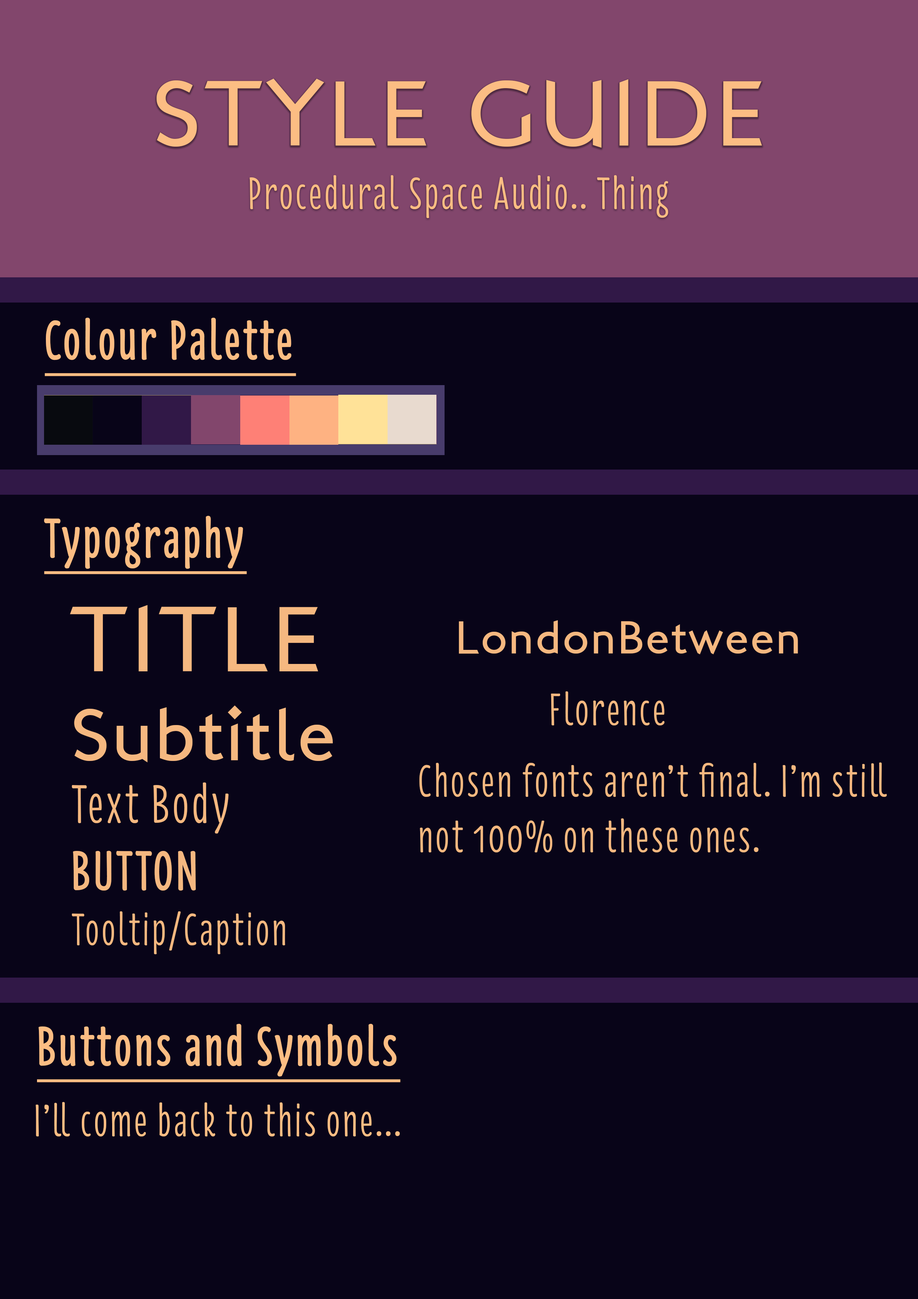
<style>
.page{position:relative;width:918px;height:1299px;background:#080418}
.page>*{position:absolute;margin:0}
.t1{font:92.6px "LondonBetween";letter-spacing:0.05em;color:#fcbd83}
.t2{font:46.3px "Florence-Regular";letter-spacing:0.05em;color:#fcbd83}
.t3{font:55.5px "Florence-Regular";letter-spacing:0.05em;color:#fcbd83;font-weight:bold;text-decoration:underline}
.t4{font:74px "LondonBetween";letter-spacing:0.05em;color:#f5b880}
.t5{font:92.6px "LondonBetween";letter-spacing:0.05em;color:#f5b880}
.t6{font:46.3px "LondonBetween";letter-spacing:0.05em;color:#f5b880}
.t7{font:46.3px "Florence-Regular";letter-spacing:0.05em;color:#f5b880}
.t8{font:55.5px "Florence-Regular";letter-spacing:0.05em;color:#f5b880}
.t9{font:55.5px "Florence-Regular";letter-spacing:0.05em;color:#f5b880;font-weight:bold}
</style>
<div class="page">
<p class="t1" style="left:157px;top:78px;width:605px;height:70px">STYLE GUIDE</p>
<p class="t2" style="left:250px;top:175px;width:418px;height:43px">Procedural Space Audio.. Thing</p>
<p class="t3" style="left:45px;top:317px;width:251px;height:59px">Colour Palette</p>
<p class="t3" style="left:44px;top:515px;width:203px;height:59px">Typography</p>
<p class="t4" style="left:70px;top:605px;width:263px;height:157px"><span class="t5">TITLE<br></span>Subtitle</p>
<p class="t6" style="left:459px;top:620px;width:339px;height:34px">LondonBetween</p>
<p class="t7" style="left:551px;top:691px;width:114px;height:35px">Florence</p>
<p class="t7" style="left:419px;top:762px;width:468px;height:91px">Chosen fonts aren’t final. I’m still<br>not 100% on these ones.</p>
<p class="t7" style="left:72px;top:782px;width:213px;height:172px"><span class="t8">Text Body<br></span><span class="t9">BUTTON<br></span>Tooltip/Caption</p>
<p class="t3" style="left:37px;top:1023px;width:364px;height:59px">Buttons and Symbols</p>
<p class="t2" style="left:36px;top:1102px;width:364px;height:35px">I’ll come back to this one...</p>
</div>
